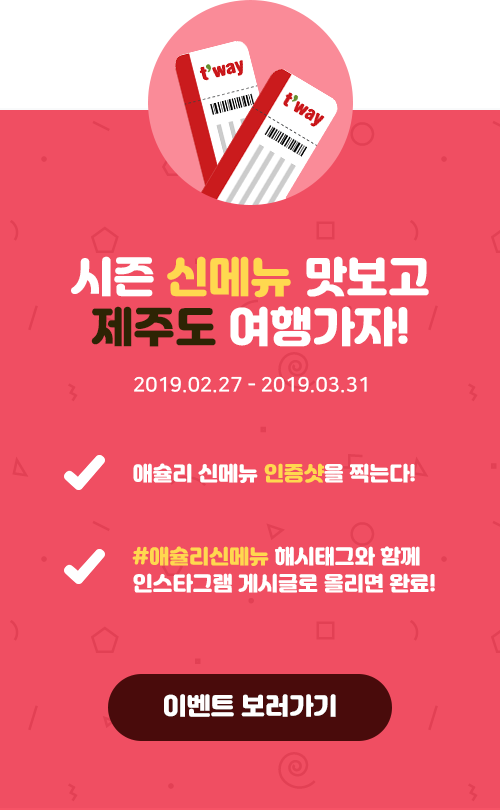
<style>
.page{position:relative;width:500px;height:810px;background:#f04e62}
.page>*{position:absolute;margin:0}
.t1{font:42px "Jalnan";color:#ffffff}
.t2{font:42px "Jalnan";color:#ffd84f}
.t3{font:42px "Jalnan";color:#2d2404}
.t4{font:20px "NanumSquare_acB";color:#ffffff}
.t5{font:20px "Jalnan";color:#ffffff}
.t6{font:20px "Jalnan";color:#ffd84f}
.t7{font:20px/27px "Jalnan";color:#ffffff}
.t8{font:20px/27px "Jalnan";color:#ffd84f}
.t9{font:24px "Jalnan";color:#ffffff}
</style>
<div class="page">
<p class="t1" style="left:71px;top:256px;width:358px;height:91px;text-align:center">시즌 <span class="t2">신메뉴</span> 맛보고<br><span class="t3">제주도</span> 여행가자!</p>
<p class="t4" style="left:134px;top:376px;width:233px;height:17px">2019.02.27 - 2019.03.31</p>
<p class="t5" style="left:133px;top:463px;width:282px;height:20px">애슐리 신메뉴 <span class="t6">인증샷</span>을 찍는다!</p>
<p class="t7" style="left:132px;top:546px;width:303px;height:47px"><span class="t8">#애슐리신메뉴</span> 해시태그와 함께 인스타그램 게시글로 올리면 완료!</p>
<p class="t9" style="left:164px;top:694px;width:172px;height:23px">이벤트 보러가기</p>
</div>
